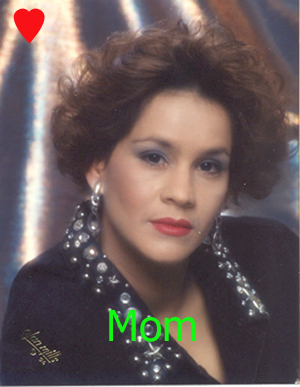
<style>
.page{position:relative;width:300px;height:387px}
.page>*{position:absolute;margin:0}
.t1{font:42.8px "Tahoma";color:#12f812}
</style>
<div class="page">
<p class="t1" style="left:109px;top:310px;width:87px;height:32px">Mom</p>
</div>
